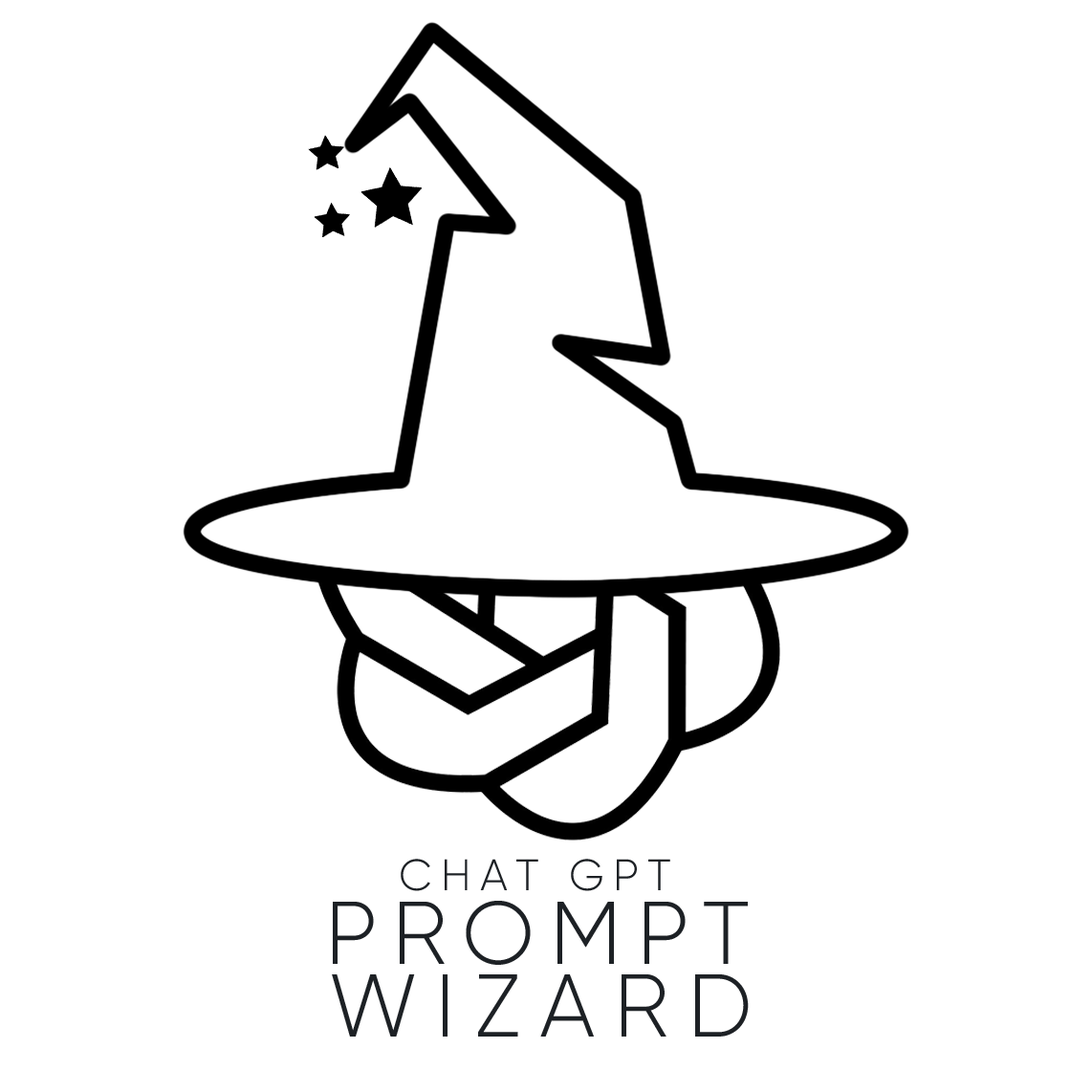
<style>
.page{position:relative;width:1092px;height:1092px;background:#ffffff}
.page>*{position:absolute;margin:0}
.t1{font:44px "Gilroy-Light";letter-spacing:0.2em;color:#1d2125;text-transform:uppercase}
.t2{font:88.9px "Gilroy-Light";letter-spacing:0.16em;color:#1d2125;text-transform:uppercase}
.t3{font:88.9px "Gilroy-Light";letter-spacing:0.2em;color:#1d2125;text-transform:uppercase}
</style>
<div class="page">
<p class="t1" style="left:401px;top:859px;width:269px;height:32px">chat gpt</p>
<p class="t2" style="left:333px;top:901px;width:415px;height:64px">prompt</p>
<p class="t3" style="left:332px;top:973px;width:417px;height:64px">wizard</p>
</div>
